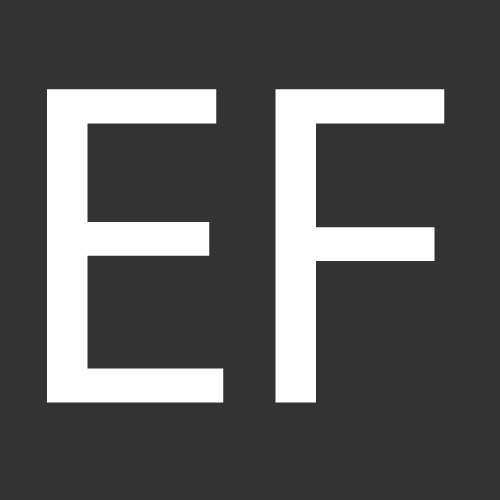
<style>
.page{position:relative;width:500px;height:500px;background:#333333}
.page>*{position:absolute;margin:0}
.t1{font:464.4px "MyriadPro-Regular";color:#ffffff}
</style>
<div class="page">
<p class="t1" style="left:47px;top:89px;width:398px;height:314px">EF</p>
</div>
